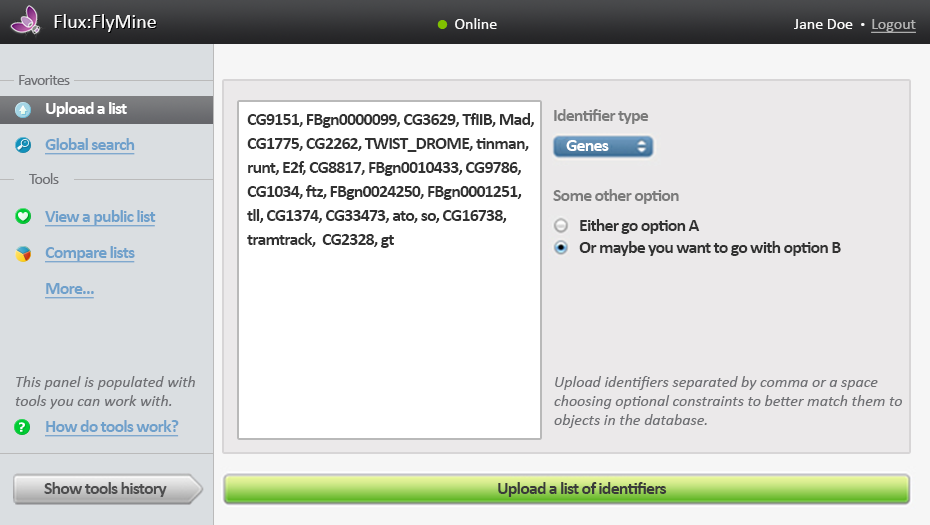
<style>
.page{position:relative;width:930px;height:525px;background:#ebe9ea}
.page>*{position:absolute;margin:0}
.t1{font:20px "Calibri";color:#f9f9f9}
.t2{font:16px "Calibri";color:#fafafa}
.t3{font:30px "Calibri";color:#81c000}
.t4{font:10px "Calibri";color:#fafafa}
.t5{font:16px "Calibri";color:#b3b3b3;text-decoration:underline}
.t6{font:16px "Calibri";letter-spacing:-0.05em;color:#6f7074}
.t7{font:18px/36px "Calibri-Bold";letter-spacing:-0.05em;color:#6fa0cb;text-decoration:underline}
.t8{font:18px/36px "Calibri-Bold";letter-spacing:-0.05em;color:#ffffff}
.t9{font:18px/24px "Calibri-Bold";letter-spacing:-0.05em;color:#323232}
.t10{font:18px "Calibri-Bold";letter-spacing:-0.05em;color:#7c7c7c}
.t11{font:18px "Calibri-Bold";letter-spacing:-0.05em;color:#fefefe}
.t12{font:18px/22px "Calibri-Bold";letter-spacing:-0.05em;color:#323232}
.t13{font:16px "Calibri-Italic";color:#6f7074}
.t14{font:18px "Calibri-Bold";letter-spacing:-0.05em;color:#6fa0cb;text-decoration:underline}
.t15{font:18px "Calibri-Bold";letter-spacing:-0.05em;color:#4e4e4f}
.t16{font:18px "Calibri-Bold";letter-spacing:-0.05em;color:#3a3a3a}
</style>
<div class="page">
<p class="t1" style="left:54px;top:14px;width:102px;height:18px">Flux:FlyMine</p>
<p class="t2" style="left:437px;top:18px;width:60px;height:11px"><span class="t3">•  </span>Online</p>
<p class="t2" style="left:794px;top:19px;width:122px;height:14px">Jane Doe  <span class="t4">•  </span><span class="t5">Logout</span></p>
<p class="t6" style="left:19px;top:75px;width:51px;height:10px">Favorites</p>
<p class="t7" style="left:45px;top:102px;width:111px;height:197px"><span class="t8">Upload a list<br></span>Global search<br><br>View a public list<br>Compare lists<br>More...</p>
<p class="t9" style="left:247px;top:113px;width:287px;height:135px">CG9151, FBgn0000099, CG3629, TfIIB, Mad,<br>CG1775, CG2262, TWIST_DROME, tinman,<br>runt, E2f, CG8817, FBgn0010433, CG9786,<br>CG1034, ftz, FBgn0024250, FBgn0001251,<br>tll, CG1374, CG33473, ato, so, CG16738,<br>tramtrack,  CG2328, gt</p>
<p class="t10" style="left:554px;top:109px;width:95px;height:15px">Identifier type</p>
<p class="t11" style="left:566px;top:140px;width:43px;height:11px">Genes</p>
<p class="t6" style="left:29px;top:173px;width:30px;height:11px">Tools</p>
<p class="t10" style="left:553px;top:189px;width:126px;height:15px">Some other option</p>
<p class="t12" style="left:579px;top:219px;width:262px;height:37px">Either go option A<br>Or maybe you want to go with option B</p>
<p class="t13" style="left:15px;top:376px;width:180px;height:33px">This panel is populated with<br>tools you can work with.</p>
<p class="t13" style="left:554px;top:376px;width:348px;height:52px">Upload identifiers separated by comma or a space<br>choosing optional constraints to better match them to<br>objects in the database.</p>
<p class="t14" style="left:45px;top:420px;width:134px;height:17px">How do tools work?</p>
<p class="t15" style="left:44px;top:482px;width:123px;height:15px">Show tools history</p>
<p class="t16" style="left:498px;top:482px;width:169px;height:15px">Upload a list of identifiers</p>
</div>
